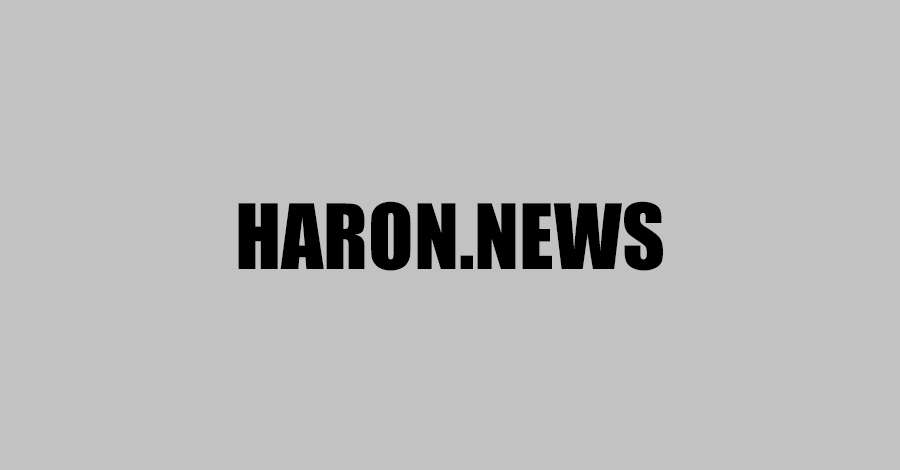
<style>
.page{position:relative;width:900px;height:470px;background:#c2c2c2}
.page>*{position:absolute;margin:0}
.t1{font:83.3px "Impact";color:#000000}
</style>
<div class="page">
<p class="t1" style="left:238px;top:201px;width:425px;height:70px">HARON.NEWS</p>
</div>
